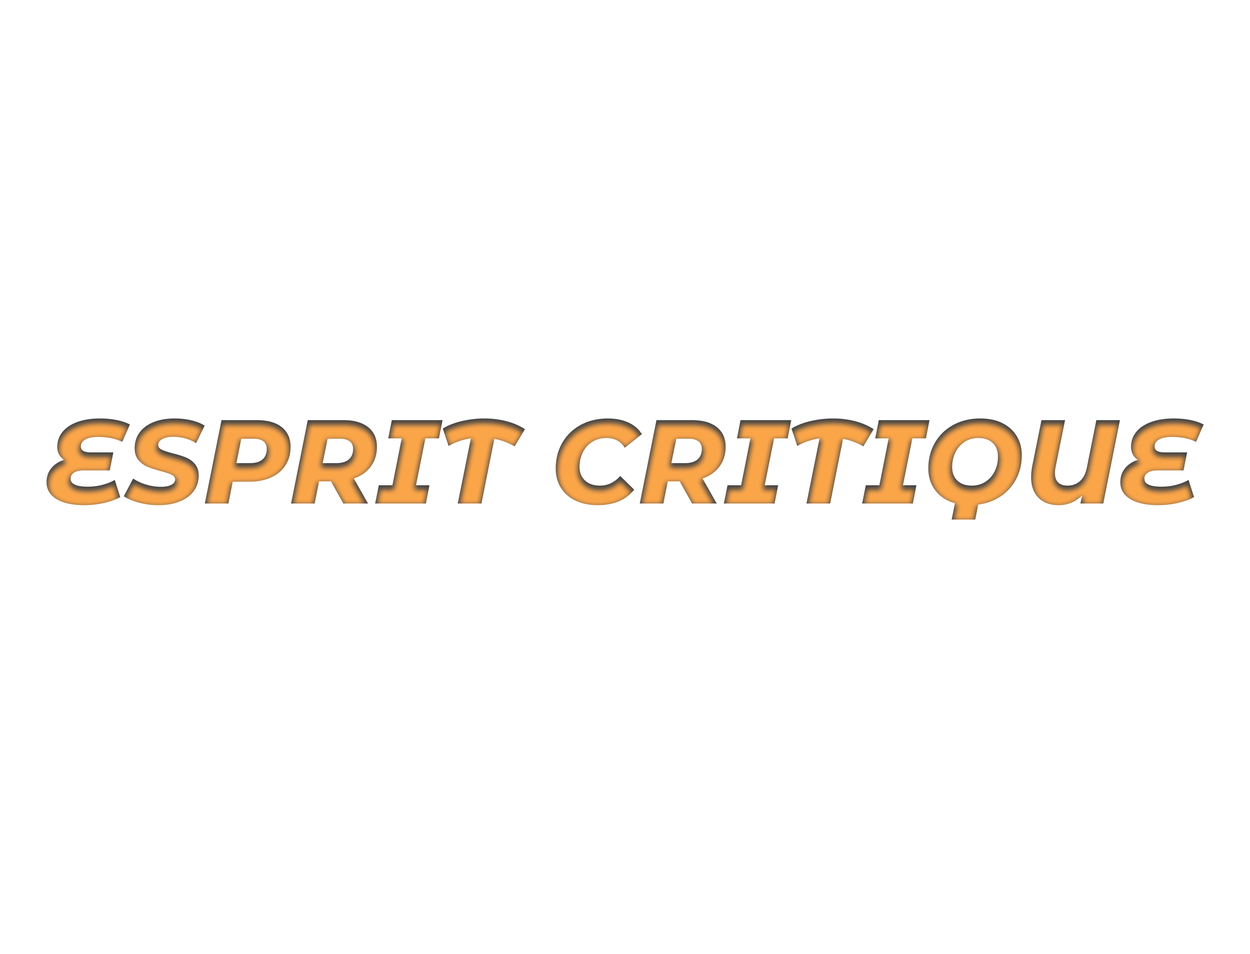
<style>
.page{position:relative;width:1250px;height:954px;background:#ffffff}
.page>*{position:absolute;margin:0}
.t1{font:119.1px "MontserratAlternates-ExtraBoldItalic"}
</style>
<div class="page">
<p class="t1" style="left:46px;top:418px;width:1158px;height:102px">ESPRIT CRITIQUE</p>
</div>
